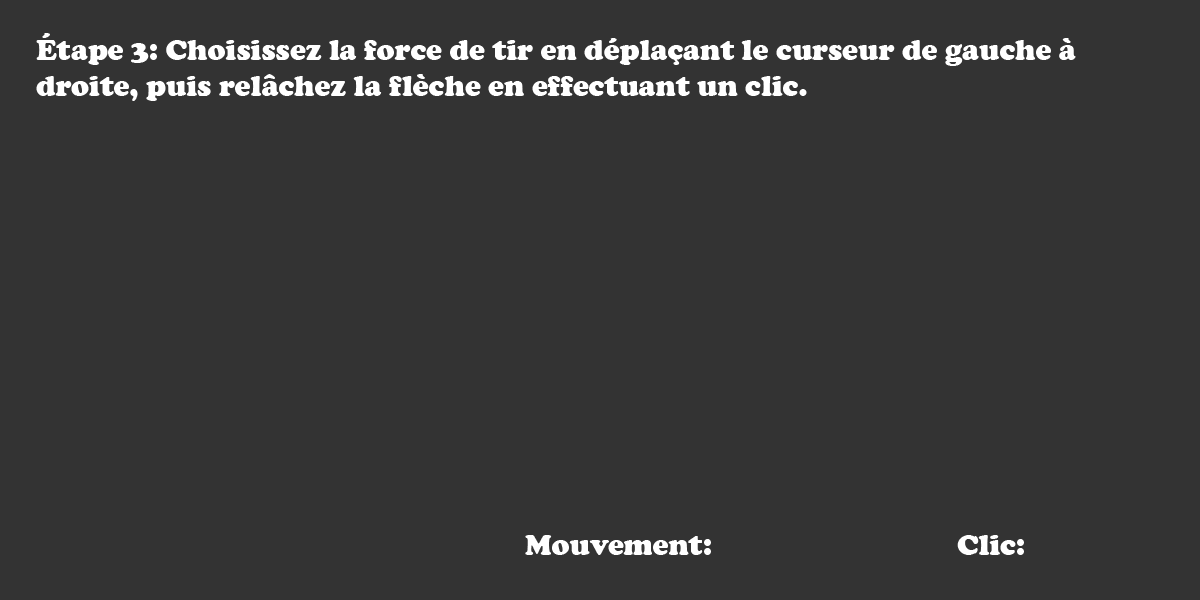
<style>
.page{position:relative;width:1200px;height:600px;background:#333333}
.page>*{position:absolute;margin:0}
.t1{font:30px "CooperBlack";color:#ffffff}
</style>
<div class="page">
<p class="t1" style="left:36px;top:33px;width:1040px;height:68px;text-align:right">Étape 3: Choisissez la force de tir en déplaçant le curseur de gauche à droite, puis relâchez la flèche en effectuant un clic.</p>
<p class="t1" style="left:525px;top:535px;width:499px;height:20px">Mouvement:       Clic:</p>
</div>
